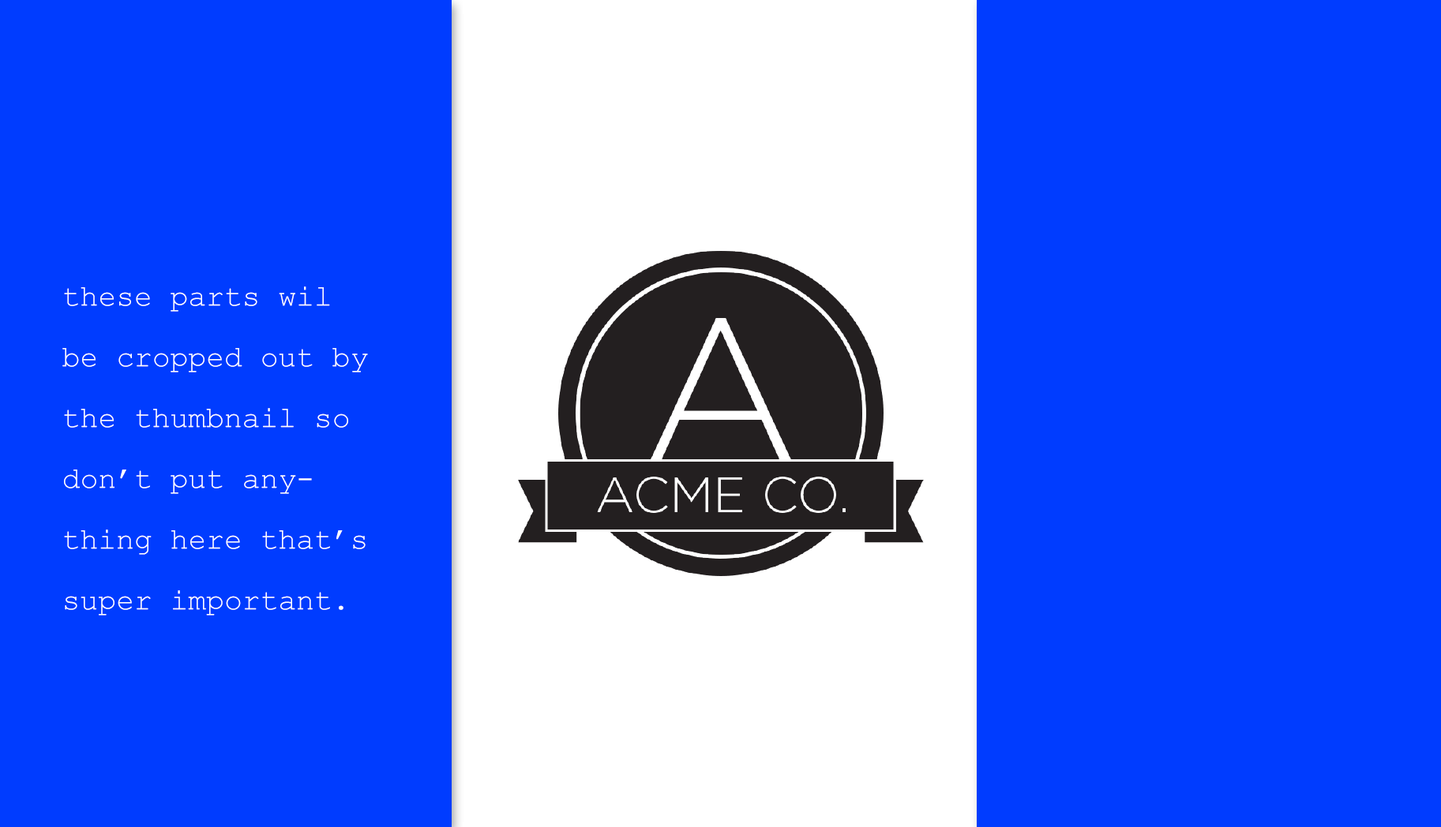
<style>
.page{position:relative;width:1441px;height:827px;background:#003cff}
.page>*{position:absolute;margin:0}
.t1{font:30px/60.8px "CourierNewPSMT";color:#ffffff}
</style>
<div class="page">
<p class="t1" style="left:62px;top:287px;width:306px;height:329px">these parts wil be cropped out by the thumbnail so don’t put anything here that’s super important.</p>
</div>
